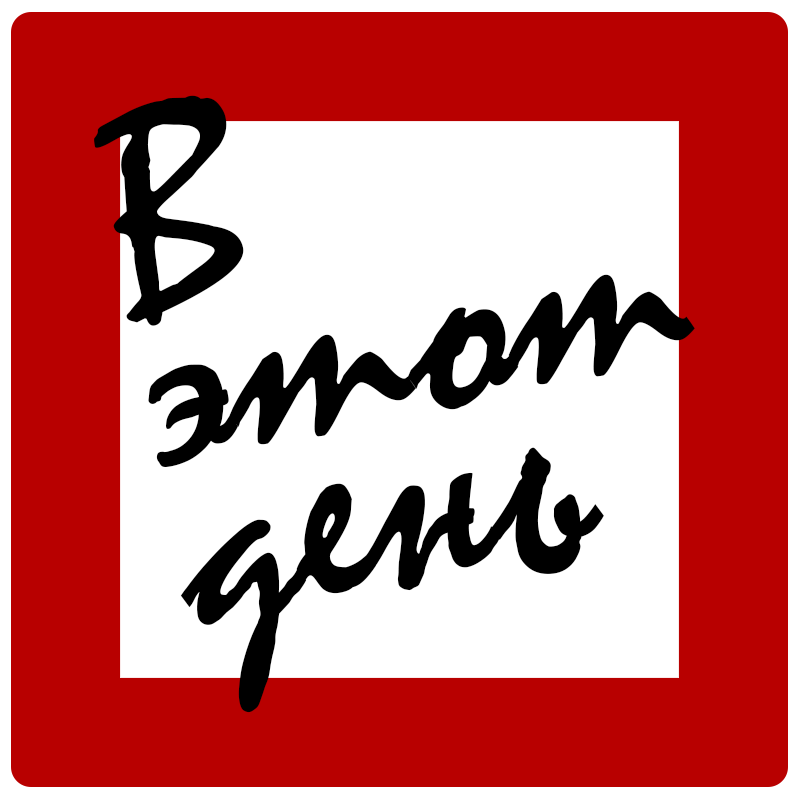
<style>
.page{position:relative;width:800px;height:800px;background:#b80000}
.page>*{position:absolute;margin:0}
.t1{font:295px/164.2px "Mistral";color:#000000}
</style>
<div class="page">
<p class="t1" style="left:94px;top:95px;width:601px;height:618px;text-align:right;rotate:-12deg">В<br>этот<br>день</p>
</div>
